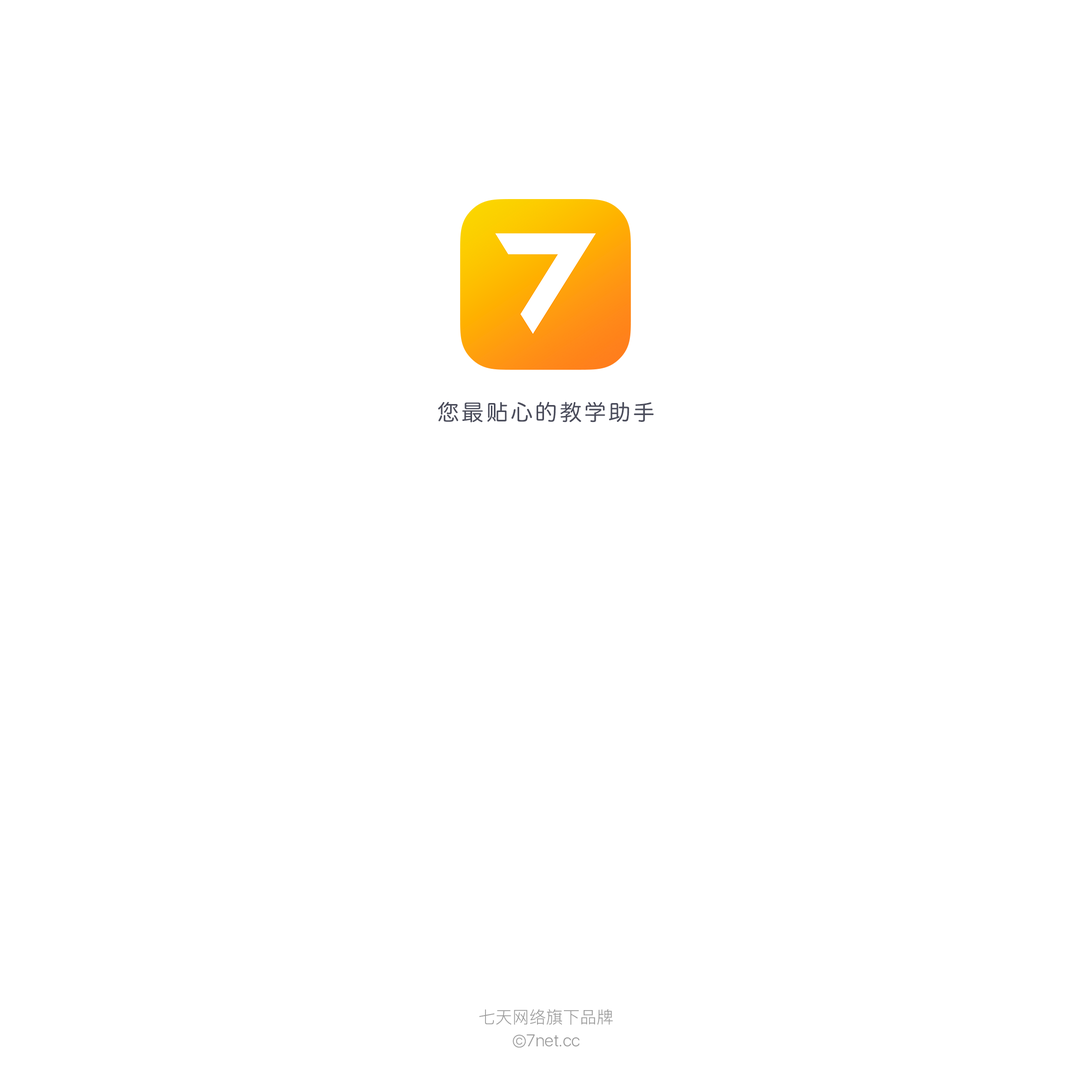
<style>
.page{position:relative;width:1092px;height:1092px;background:#ffffff}
.page>*{position:absolute;margin:0}
.t1{font:21.8px "QingYuan";letter-spacing:0.12em;color:#4a4c5b}
.t2{font:16.9px/26.4px "PingFang-SC-Regular";color:#999999}
.t3{font:16.9px/26.4px "SFUIDisplay-Light";color:#999999}
</style>
<div class="page">
<p class="t1" style="left:438px;top:402px;width:216px;height:20px">您最贴心的教学助手</p>
<p class="t2" style="left:479px;top:1009px;width:134px;height:39px;text-align:center">七天网络旗下品牌<br><span class="t3">©7net.cc</span></p>
</div>
